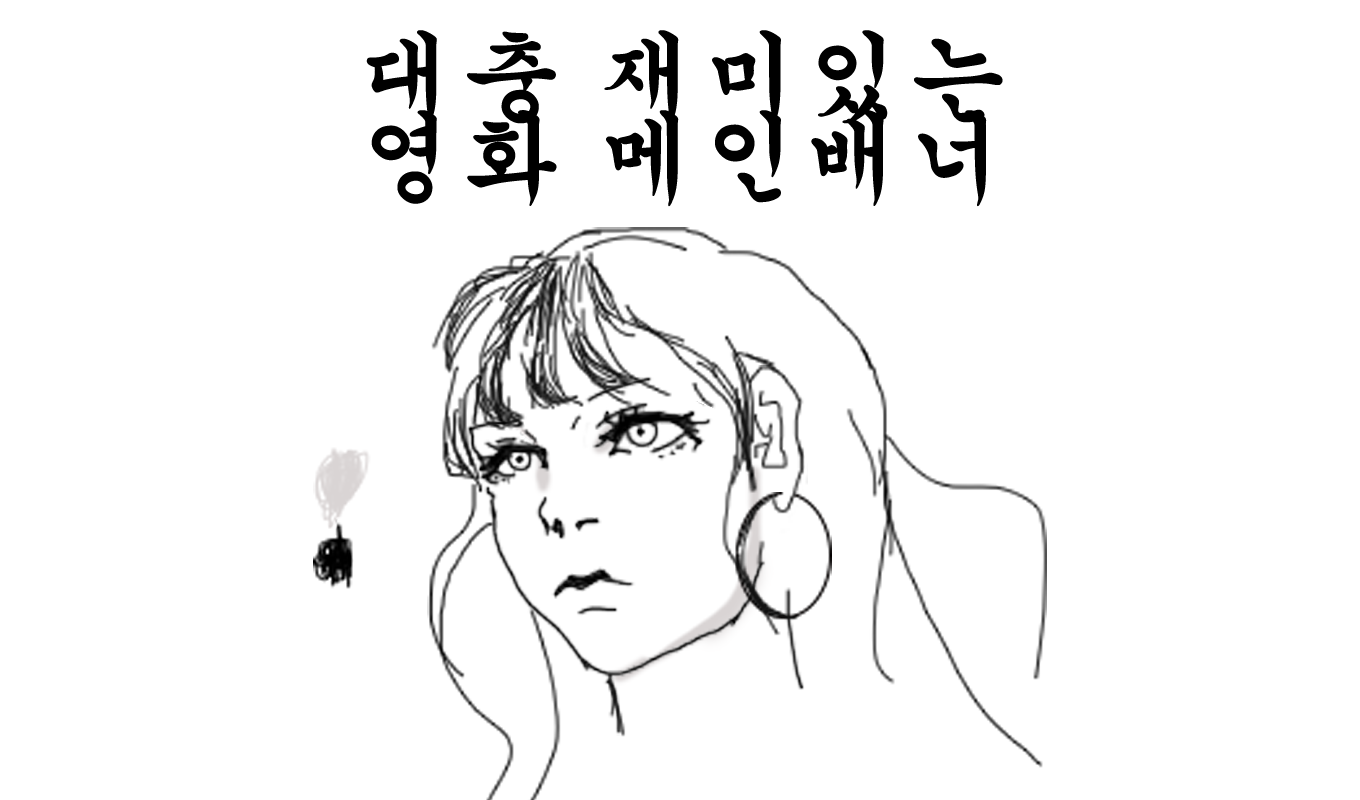
<style>
.page{position:relative;width:1360px;height:800px;background:#ffffff}
.page>*{position:absolute;margin:0}
.t1{font:100px/80px "H2gsrB";color:#000000;font-weight:bold}
</style>
<div class="page">
<p class="t1" style="left:366px;top:30px;width:637px;height:177px;text-align:center">대충 재미있는 영화 메인배너</p>
</div>
